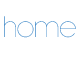
<style>
.page{position:relative;width:80px;height:60px;background:#ffffff}
.page>*{position:absolute;margin:0}
.t1{font:20.8px "BondoluoPeek"}
</style>
<div class="page">
<p class="t1" style="left:4px;top:16px;width:72px;height:22px">HOME</p>
</div>
